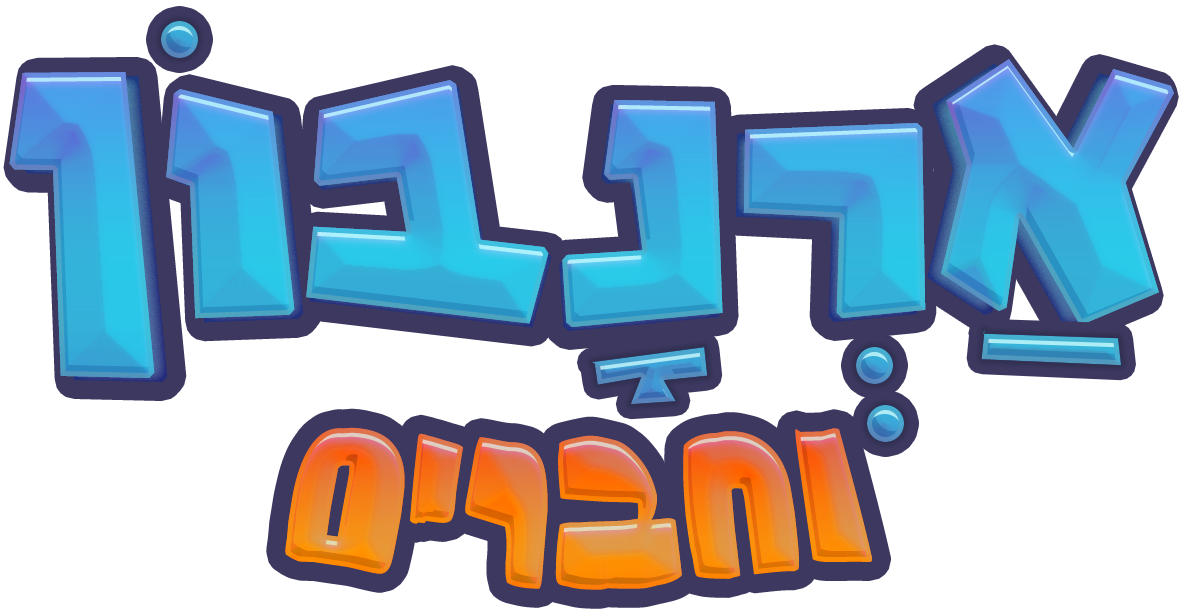
<style>
.page{position:relative;width:1186px;height:614px;background:#ffffff}
.page>*{position:absolute;margin:0}
.t1{font:364px "Shaltplain";letter-spacing:-0.025em;font-weight:bold}
.t2{font:364px "Shaltplain";letter-spacing:-0.04em;font-weight:bold}
.t3{font:184px "BNAlpaca"}
</style>
<div class="page">
<p class="t1" style="left:9px;top:59px;width:1165px;height:319px">ארנבון</p>
<p class="t1" style="left:9px;top:59px;width:1165px;height:319px">ארנבון</p>
<p class="t1" style="left:9px;top:59px;width:1165px;height:319px">ארנבון</p>
<p class="t1" style="left:9px;top:59px;width:1165px;height:319px">ארנבון</p>
<p class="t1" style="left:9px;top:59px;width:1165px;height:319px">ארנבון</p>
<p class="t1" style="left:9px;top:59px;width:1165px;height:319px">ארנבון</p>
<p class="t2" style="left:22px;top:63px;width:1138px;height:319px">ארנבון</p>
<p class="t3" style="left:285px;top:427px;width:587px;height:163px">וחברים</p>
<p class="t3" style="left:285px;top:427px;width:587px;height:163px">וחברים</p>
<p class="t3" style="left:285px;top:427px;width:587px;height:163px">וחברים</p>
<p class="t3" style="left:285px;top:427px;width:587px;height:163px">וחברים</p>
<p class="t3" style="left:285px;top:427px;width:587px;height:163px">וחברים</p>
<p class="t3" style="left:285px;top:427px;width:587px;height:163px">וחברים</p>
</div>
